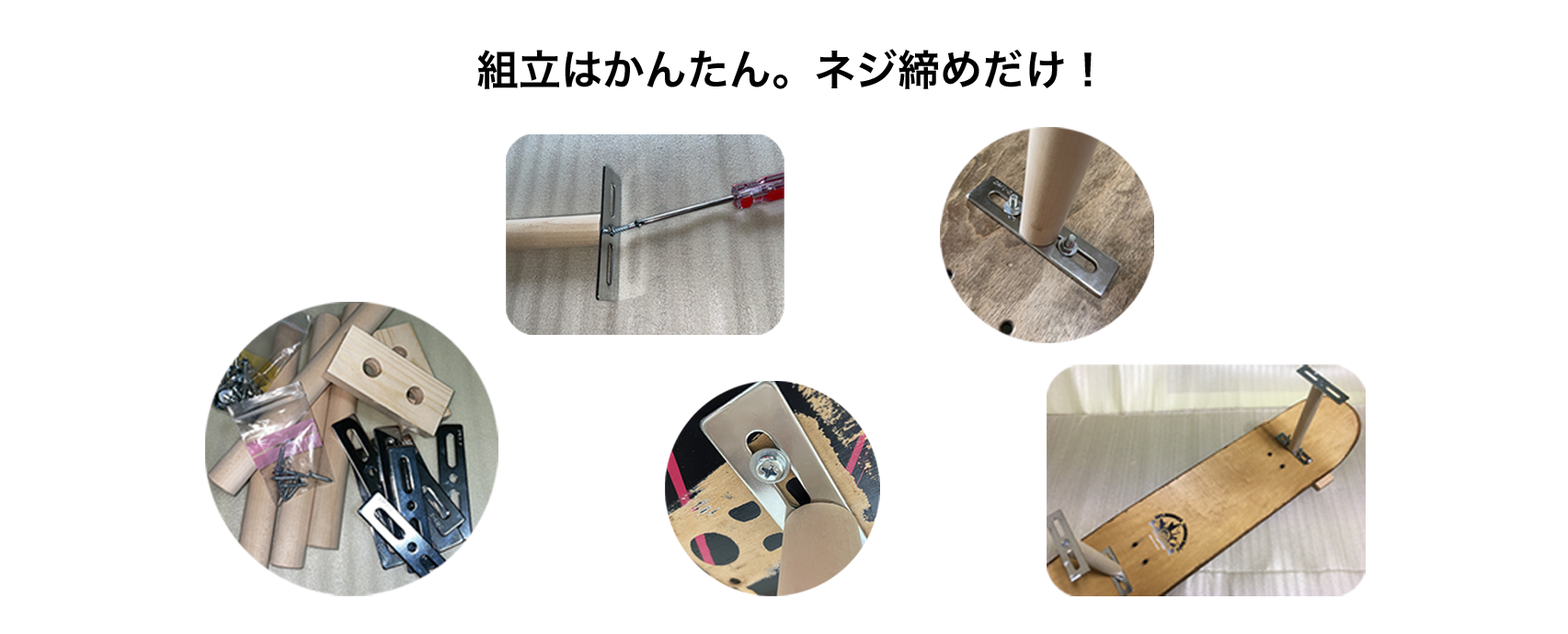
<style>
.page{position:relative;width:1568px;height:634px;background:#ffffff}
.page>*{position:absolute;margin:0}
.t1{font:42.2px "HiraKakuProN-W6";color:#000000}
</style>
<div class="page">
<p class="t1" style="left:477px;top:49px;width:615px;height:40px">組立はかんたん。ネジ締めだけ！</p>
</div>
